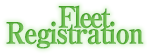
<style>
.page{position:relative;width:147px;height:55px;background:#ffffff}
.page>*{position:absolute;margin:0}
.t1{font:29px/16px "RyuminPro-ExBold";letter-spacing:-0.08em;color:#66b549;font-weight:bold;scale:0.9 1}
.t2{font:29px/16px "RyuminPro-ExBold";letter-spacing:-0.12em;color:#66b549;font-weight:bold;scale:0.9 1}
</style>
<div class="page">
<p class="t1" style="left:6px;top:5px;width:138px;height:44px;text-align:center"><span class="t2">   Fleet<br></span>Registration</p>
</div>
